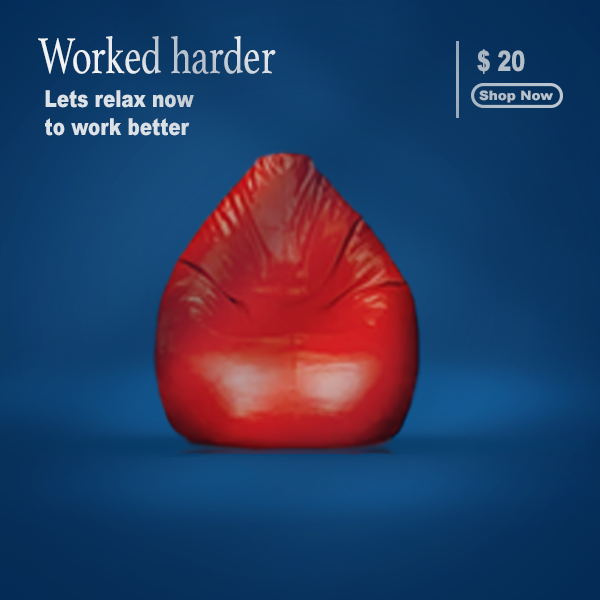
<style>
.page{position:relative;width:600px;height:600px}
.page>*{position:absolute;margin:0}
.t1{font:52.9px "Athelas-Regular";scale:0.71 1}
.t2{font:28.3px "Arial-Black";color:#b1bdc8;scale:0.73 1}
.t3{font:23.2px "Arial-Black";color:#dce3e8;scale:0.79 1}
.t4{font:12.9px "Arial-Black";color:#b5c0cb;scale:1.05 1}
</style>
<div class="page">
<p class="t1" style="left:38px;top:36px;width:238px;height:38px">Worked harder</p>
<p class="t2" style="left:477px;top:49px;width:48px;height:25px">$ 20</p>
<p class="t3" style="left:45px;top:90px;width:149px;height:46px">Lets relax now <br>to work better</p>
<p class="t4" style="left:479px;top:90px;width:74px;height:13px">Shop Now</p>
</div>
